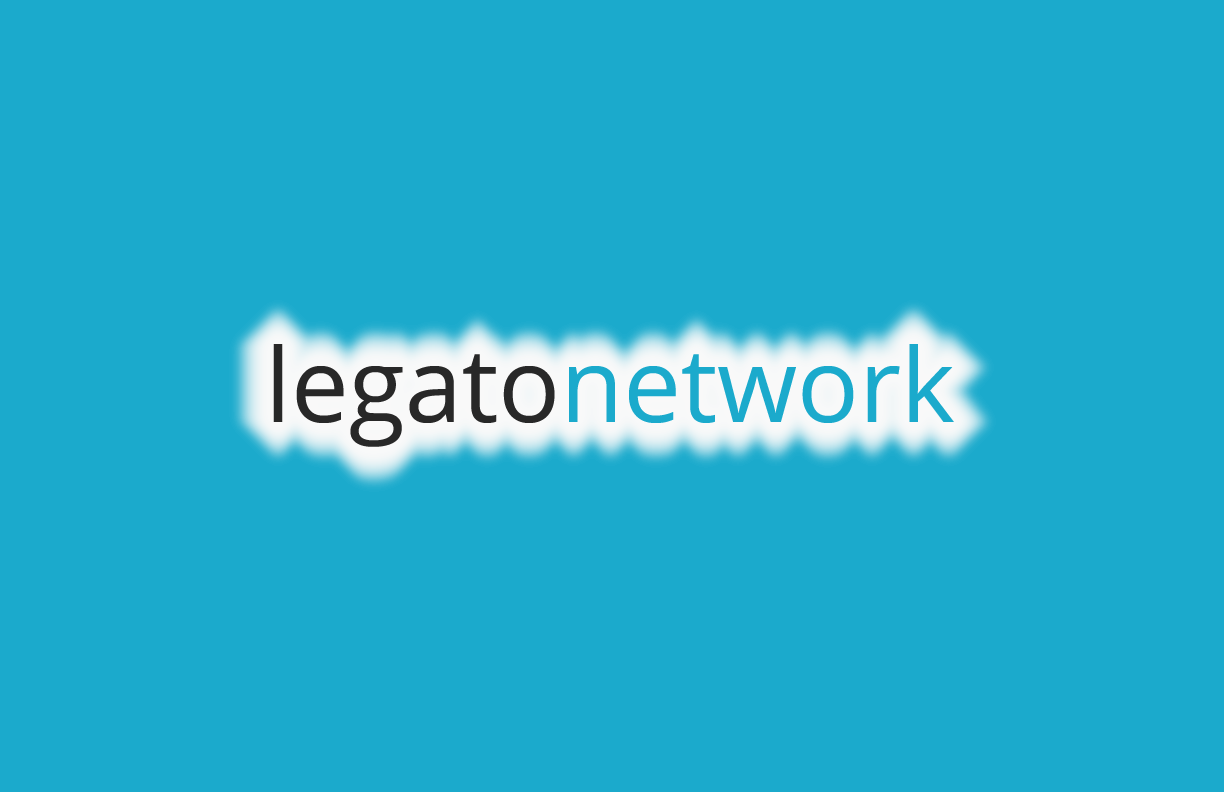
<style>
.page{position:relative;width:1224px;height:792px;background:#1baacc}
.page>*{position:absolute;margin:0}
.t1{font:102.7px "OpenSans";color:#1baacc}
.t2{font:102.7px "OpenSans";color:#282828}
</style>
<div class="page">
<p class="t1" style="left:273px;top:344px;width:681px;height:103px"><span class="t2">legato</span>network</p>
</div>
